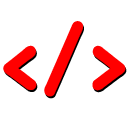
<style>
.page{position:relative;width:128px;height:128px;background:#ffffff}
.page>*{position:absolute;margin:0}
.t1{font:83.3px "Chalkboard-Bold";color:#ff0000}
</style>
<div class="page">
<p class="t1" style="left:3px;top:21px;width:123px;height:76px">&lt;/&gt;</p>
</div>
